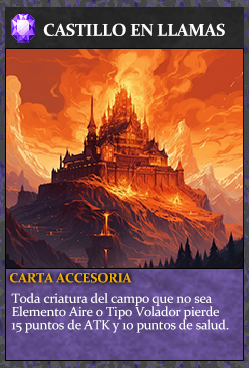
<style>
.page{position:relative;width:249px;height:368px}
.page>*{position:absolute;margin:0}
.t1{font:17.3px "Constantia-Bold";letter-spacing:-0.02em;color:#ffffff}
.t2{font:13.3px "Constantia-Bold";letter-spacing:-0.02em;color:#f2ac05}
.t3{font:13.3px/13.3px "Constantia";letter-spacing:-0.02em;color:#ffffff}
</style>
<div class="page">
<p class="t1" style="left:43px;top:23px;width:182px;height:13px">CASTILLO EN LLAMAS</p>
<p class="t2" style="left:10px;top:273px;width:122px;height:10px">CARTA ACCESORIA</p>
<p class="t3" style="left:11px;top:293px;width:218px;height:40px">Toda criatura del campo que no sea<br>Elemento Aire o Tipo Volador pierde<br>15 puntos de ATK y 10 puntos de salud.</p>
</div>
